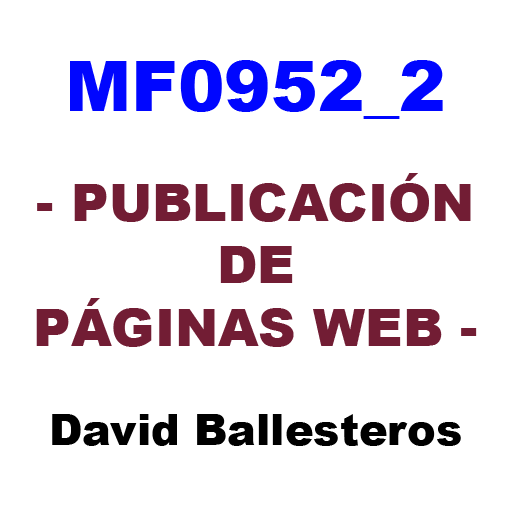
<style>
.page{position:relative;width:512px;height:512px;background:#ffffff}
.page>*{position:absolute;margin:0}
.t1{font:52px "Arial-Black";color:#721d34}
.t2{font:70px "Arial-Black";color:#0006ff}
.t3{font:43px "Arial-Black";color:#000000}
</style>
<div class="page">
<p class="t1" style="left:36px;top:60px;width:441px;height:386px;text-align:center"><span class="t2">MF0952_2<br><br></span>- PUBLICACIÓN <br>DE<br>PÁGINAS WEB -<br><br><span class="t3">David Ballesteros</span></p>
</div>
